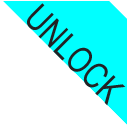
<style>
.page{position:relative;width:128px;height:128px;background:#ffffff}
.page>*{position:absolute;margin:0}
.t1{font:36px "ArialMT";color:#222224;scale:0.8 1}
</style>
<div class="page">
<p class="t1" style="left:27px;top:3px;width:99px;height:103px;rotate:45deg">UNLOCK</p>
</div>
